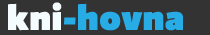
<style>
.page{position:relative;width:210px;height:35px;background:#333333}
.page>*{position:absolute;margin:0}
.t1{font:36px "GloriolaDisplayStdFat";letter-spacing:0.025em;color:#27ace5}
.t2{font:36px "GloriolaDisplayStdFat";letter-spacing:0.025em;color:#f5fcff}
</style>
<div class="page">
<p class="t1" style="left:8px;top:2px;width:175px;height:29px"><span class="t2">kni</span>-hovna</p>
</div>
